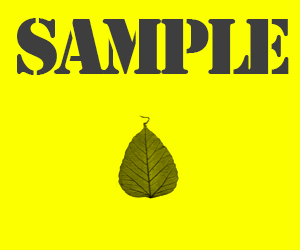
<style>
.page{position:relative;width:300px;height:250px;background:#fcff00}
.page>*{position:absolute;margin:0}
.t1{font:82px "Stencil";letter-spacing:-0.068em;color:#3f3e3e}
</style>
<div class="page">
<p class="t1" style="left:17px;top:18px;width:272px;height:57px">sample</p>
</div>
